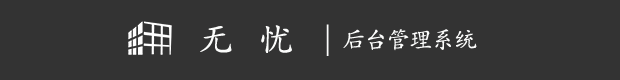
<style>
.page{position:relative;width:620px;height:80px;background:#333333}
.page>*{position:absolute;margin:0}
.t1{font:36px "AdobeKaitiStd-Regular";letter-spacing:0.2em;color:#fcfdfc}
.t2{font:30px "AdobeKaitiStd-Regular";color:#fcfdfc}
.t3{font:24px "AdobeKaitiStd-Regular";letter-spacing:-0.075em;color:#fcfdfc}
</style>
<div class="page">
<p class="t1" style="left:200px;top:25px;width:92px;height:28px">无 忧</p>
<p class="t2" style="left:326px;top:24px;width:3px;height:32px">|</p>
<p class="t3" style="left:343px;top:29px;width:134px;height:22px">后台管理系统</p>
</div>
